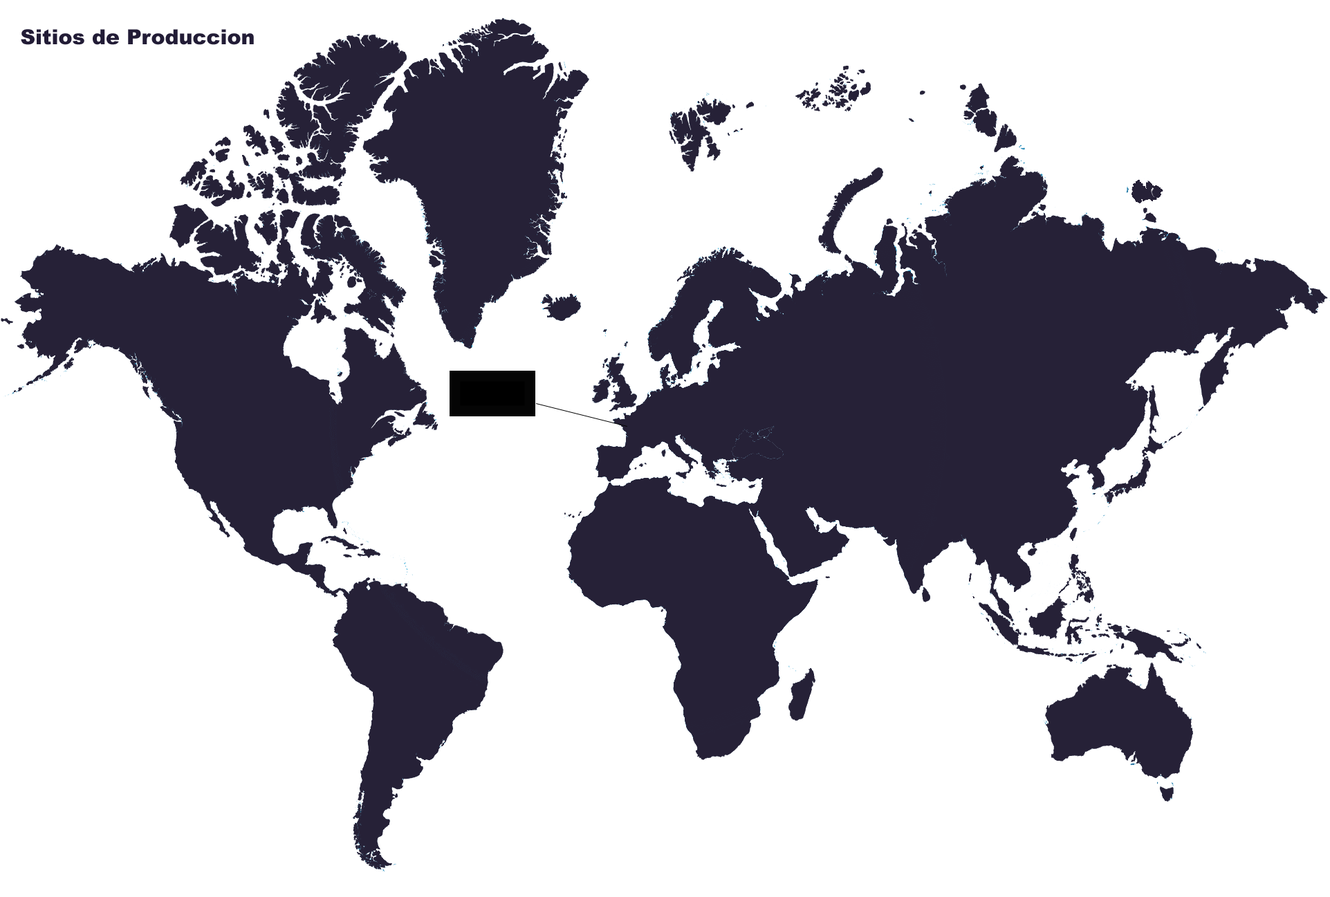
<style>
.page{position:relative;width:1330px;height:897px;background:#ffffff}
.page>*{position:absolute;margin:0}
.t1{font:20.7px "Arial-Black";color:#221c36}
</style>
<div class="page">
<p class="t1" style="left:21px;top:29px;width:233px;height:16px">Sitios de Produccion</p>
</div>
